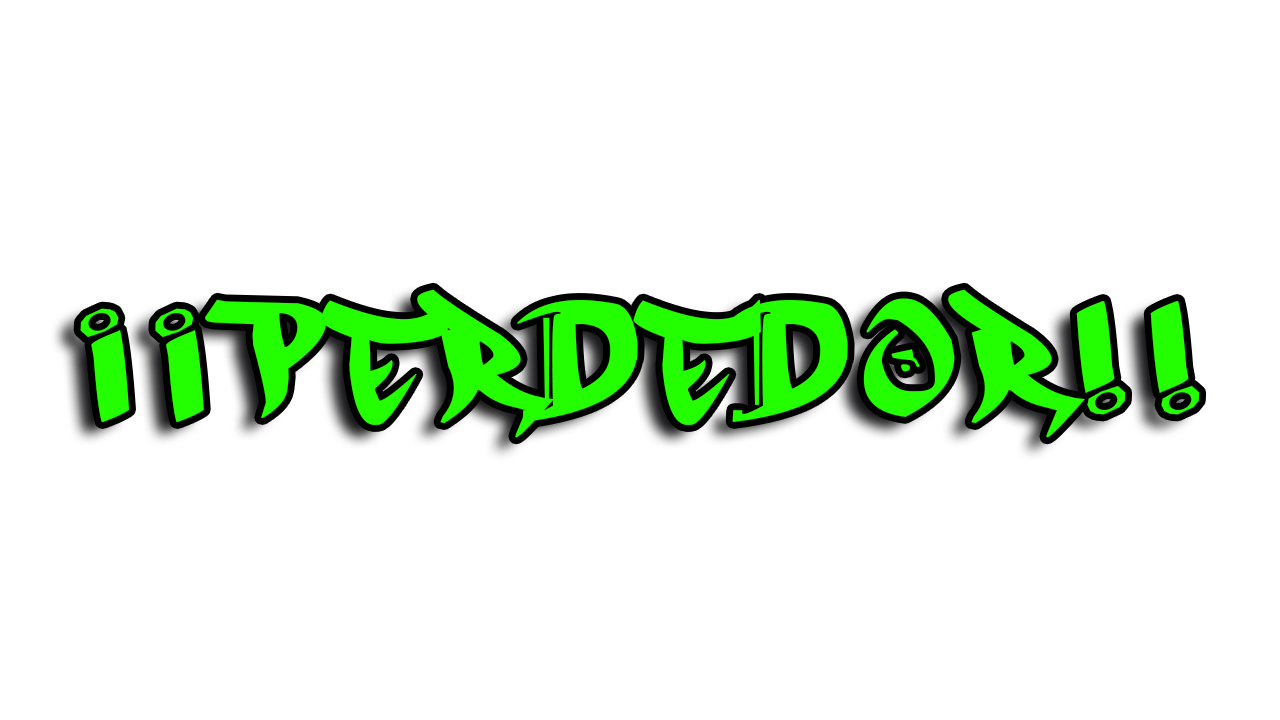
<style>
.page{position:relative;width:1280px;height:720px;background:#ffffff}
.page>*{position:absolute;margin:0}
.t1{font:125px "MESTIZOSUNIDOS-URBANHOOKUPZ";letter-spacing:0.18em;color:#24ff00}
</style>
<div class="page">
<p class="t1" style="left:205px;top:289px;width:995px;height:149px">perdedor!!</p>
<p class="t1" style="left:80px;top:308px;width:124px;height:114px;rotate:180deg">!!</p>
</div>
